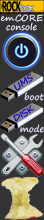
<style>
.page{position:relative;width:44px;height:220px;background:#333333}
.page>*{position:absolute;margin:0}
.t1{font:8.8px/8.8px "SegoePrint";color:#eee8ff}
.t2{font:8.8px/8.8px "SegoeScript";color:#eee8ff}
.t3{font:8.8px "SegoeScript";color:#0a00cd}
.t4{font:8.8px "SegoePrint";color:#e1e0ff}
</style>
<div class="page">
<p class="t1" style="left:0px;top:14px;width:43px;height:17px;text-align:center"><span class="t2">emCORE<br></span>console</p>
<p class="t3" style="left:13px;top:74px;width:20px;height:17px;rotate:-33deg">UMS</p>
<p class="t4" style="left:24px;top:92px;width:20px;height:9px">boot</p>
<p class="t3" style="left:13px;top:105px;width:22px;height:17px;rotate:-33deg">DISK</p>
<p class="t4" style="left:20px;top:124px;width:24px;height:9px">mode</p>
</div>
